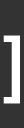
<style>
.page{position:relative;width:24px;height:128px;background:#333333}
.page>*{position:absolute;margin:0}
.t1{font:75px "AdobeGothicStd-Bold";color:#ffffff}
</style>
<div class="page">
<p class="t1" style="left:3px;top:35px;width:17px;height:69px;rotate:180deg">]</p>
</div>
